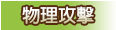
<style>
.page{position:relative;width:116px;height:30px;background:#96c341}
.page>*{position:absolute;margin:0}
.t1{font:18px "AdobeFanHeitiStd-Bold"}
</style>
<div class="page">
<p class="t1" style="left:22px;top:6px;width:72px;height:18px">物理攻擊</p>
</div>
